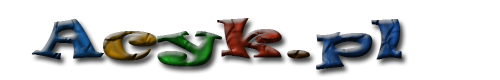
<style>
.page{position:relative;width:500px;height:80px;background:#ffffff}
.page>*{position:absolute;margin:0}
.t1{font:48px "Ravie";font-weight:bold;scale:1.5 1}
</style>
<div class="page">
<p class="t1" style="left:31px;top:18px;width:371px;height:52px">Acyk.pl</p>
</div>
